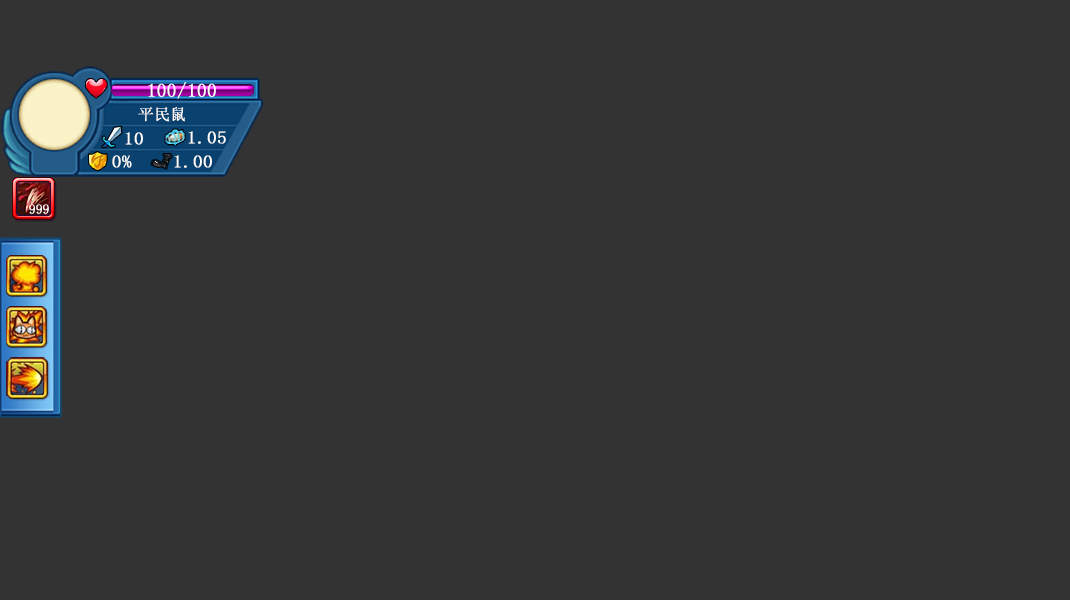
<style>
.page{position:relative;width:1070px;height:600px;background:#333333}
.page>*{position:absolute;margin:0}
.t1{font:32.7px "SimSun";color:#ffffff;font-variant:small-caps;font-weight:bold}
.t2{font:27.1px "SimSun";color:#ffffff;font-variant:small-caps;font-weight:bold}
.t3{font:29.8px "SimSun";color:#ffffff;font-variant:small-caps;font-weight:bold;scale:1.1 1}
.t4{font:22.5px "SimSun";color:#ffffff;font-variant:small-caps;font-weight:bold}
</style>
<div class="page">
<p class="t1" style="left:148px;top:82px;width:68px;height:17px">100/100</p>
<p class="t2" style="left:138px;top:107px;width:47px;height:15px">平民鼠</p>
<p class="t3" style="left:125px;top:132px;width:18px;height:13px">10</p>
<p class="t3" style="left:188px;top:131px;width:38px;height:13px">1.05</p>
<p class="t3" style="left:112px;top:155px;width:20px;height:13px">0%</p>
<p class="t3" style="left:174px;top:155px;width:38px;height:13px">1.00</p>
<p class="t4" style="left:29px;top:204px;width:20px;height:10px">999</p>
</div>
